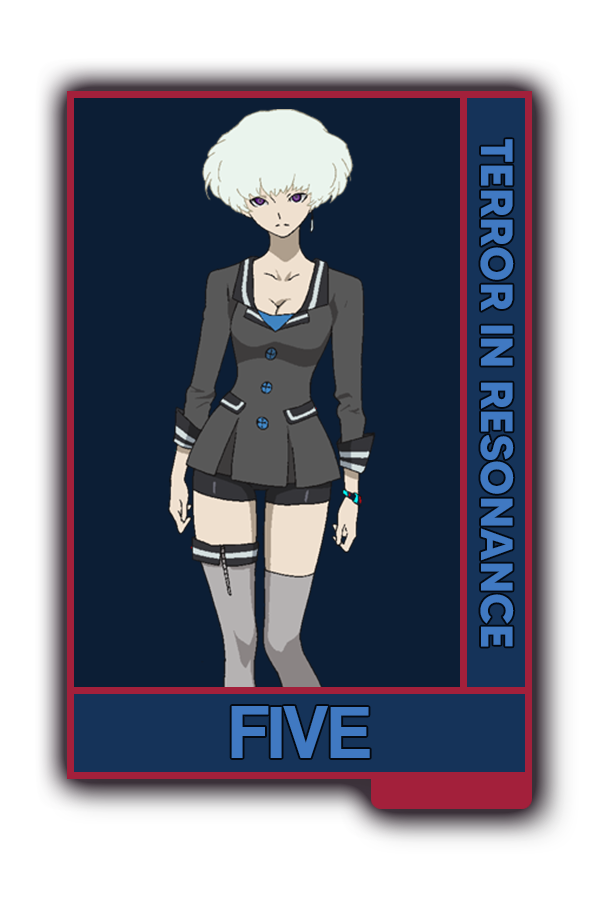
<style>
.page{position:relative;width:600px;height:900px;background:#0c1e35}
.page>*{position:absolute;margin:0}
.t1{font:45.2px "MADETOMMY-Bold";color:#4079c2}
.t2{font:77px "CoolveticaRg-Regular";color:#4079c2}
</style>
<div class="page">
<p class="t1" style="left:480px;top:139px;width:34px;height:508px;rotate:90deg">TERROR IN RESONANCE</p>
<p class="t2" style="left:231px;top:706px;width:139px;height:52px">FIVE</p>
</div>
